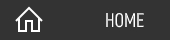
<style>
.page{position:relative;width:170px;height:40px;background:#333333}
.page>*{position:absolute;margin:0}
.t1{font:20px "D-DINCondensed";color:#ffffff}
</style>
<div class="page">
<p class="t1" style="left:106px;top:13px;width:38px;height:15px">HOME</p>
</div>
